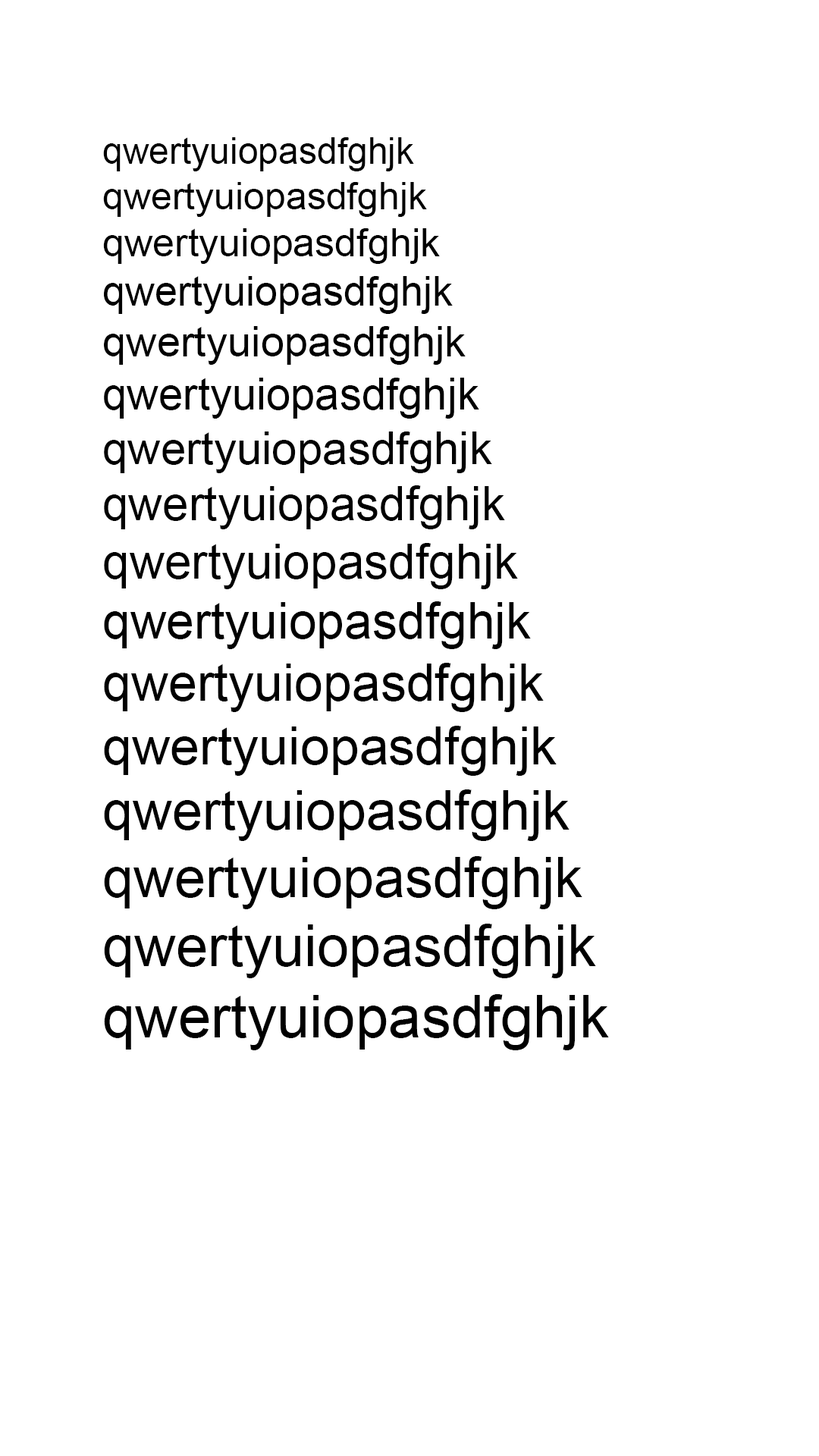
<style>
.page{position:relative;width:819px;height:1456px;background:#ffffff}
.page>*{position:absolute;margin:0}
.t1{font:36.4px "ArialMT";color:#000000}
.t2{font:37.9px "ArialMT";color:#000000}
.t3{font:39.4px "ArialMT";color:#000000}
.t4{font:40.9px "ArialMT";color:#000000}
.t5{font:42.5px "ArialMT";color:#000000}
.t6{font:44px "ArialMT";color:#000000}
.t7{font:45.5px "ArialMT";color:#000000}
.t8{font:47px "ArialMT";color:#000000}
.t9{font:48.5px "ArialMT";color:#000000}
.t10{font:50px "ArialMT";color:#000000}
.t11{font:51.6px "ArialMT";color:#000000}
.t12{font:53.1px "ArialMT";color:#000000}
.t13{font:54.6px "ArialMT";color:#000000}
.t14{font:56.1px "ArialMT";color:#000000}
.t15{font:57.6px "ArialMT";color:#000000}
.t16{font:59.1px "ArialMT";color:#000000}
</style>
<div class="page">
<p class="t1" style="left:103px;top:137px;width:506px;height:913px">qwertyuiopasdfghjk<br><span class="t2">qwertyuiopasdfghjk<br></span><span class="t3">qwertyuiopasdfghjk<br></span><span class="t4">qwertyuiopasdfghjk<br></span><span class="t5">qwertyuiopasdfghjk<br></span><span class="t6">qwertyuiopasdfghjk<br></span><span class="t7">qwertyuiopasdfghjk<br></span><span class="t8">qwertyuiopasdfghjk<br></span><span class="t9">qwertyuiopasdfghjk<br></span><span class="t10">qwertyuiopasdfghjk<br></span><span class="t11">qwertyuiopasdfghjk<br></span><span class="t12">qwertyuiopasdfghjk<br></span><span class="t13">qwertyuiopasdfghjk<br></span><span class="t14">qwertyuiopasdfghjk<br></span><span class="t15">qwertyuiopasdfghjk<br></span><span class="t16">qwertyuiopasdfghjk</span></p>
</div>
